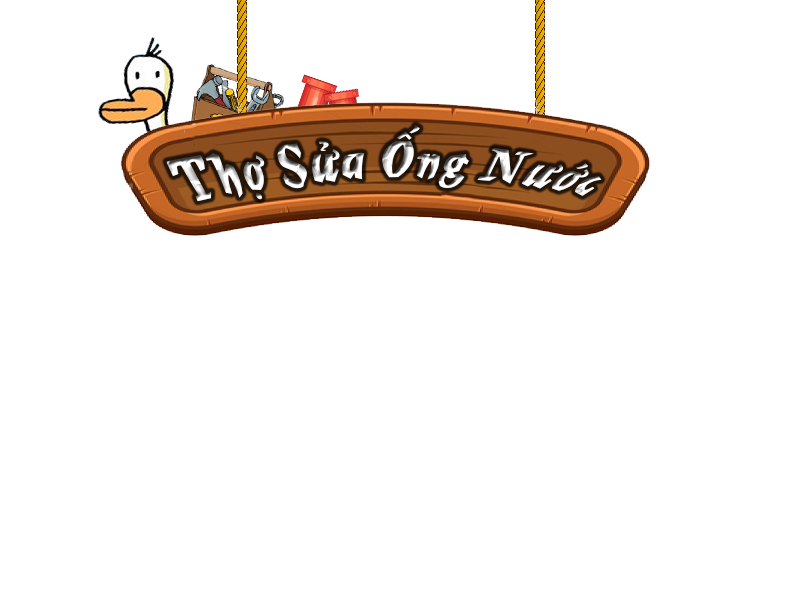
<style>
.page{position:relative;width:800px;height:600px;background:#ffffff}
.page>*{position:absolute;margin:0}
.t1{font:48px "MercuriusScript-Bold"}
</style>
<div class="page">
<p class="t1" style="left:166px;top:125px;width:436px;height:77px">Thợ Sửa Ống Nước</p>
</div>
